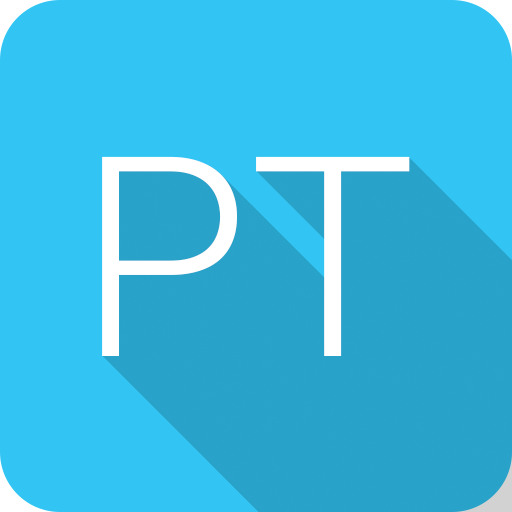
<style>
.page{position:relative;width:512px;height:512px;background:#32c5f4}
.page>*{position:absolute;margin:0}
.t1{font:280px "Roboto-Light";color:#ffffff}
</style>
<div class="page">
<p class="t1" style="left:102px;top:156px;width:308px;height:200px">PT</p>
</div>
